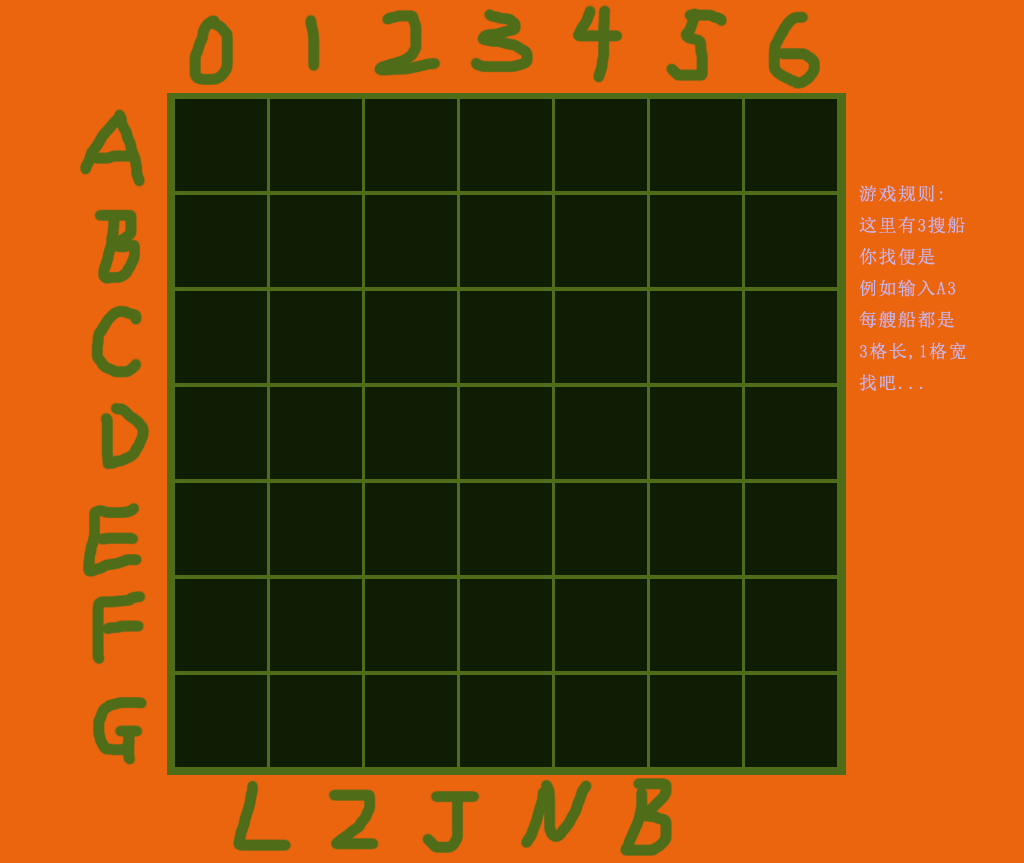
<style>
.page{position:relative;width:1024px;height:863px;background:#0f1d04}
.page>*{position:absolute;margin:0}
.t1{font:18px "SimSun";letter-spacing:0.08em;color:#c6b9e5}
</style>
<div class="page">
<p class="t1" style="left:859px;top:185px;width:107px;height:206px">游戏规则:<br>这里有3搜船<br>你找便是<br>例如输入A3<br>每艘船都是<br>3格长,1格宽<br>找吧...</p>
</div>
